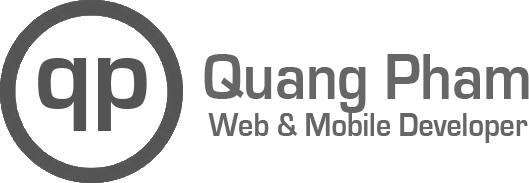
<style>
.page{position:relative;width:529px;height:183px;background:#ffffff}
.page>*{position:absolute;margin:0}
.t1{font:67.8px "EurostileBold";color:#666666;scale:0.88 1}
.t2{font:33.9px "EurostileBold";color:#666666;scale:0.88 1}
</style>
<div class="page">
<p class="t1" style="left:204px;top:54px;width:325px;height:59px">Quang Pham</p>
<p class="t2" style="left:208px;top:113px;width:320px;height:30px">Web &amp; Mobile Developer</p>
</div>
